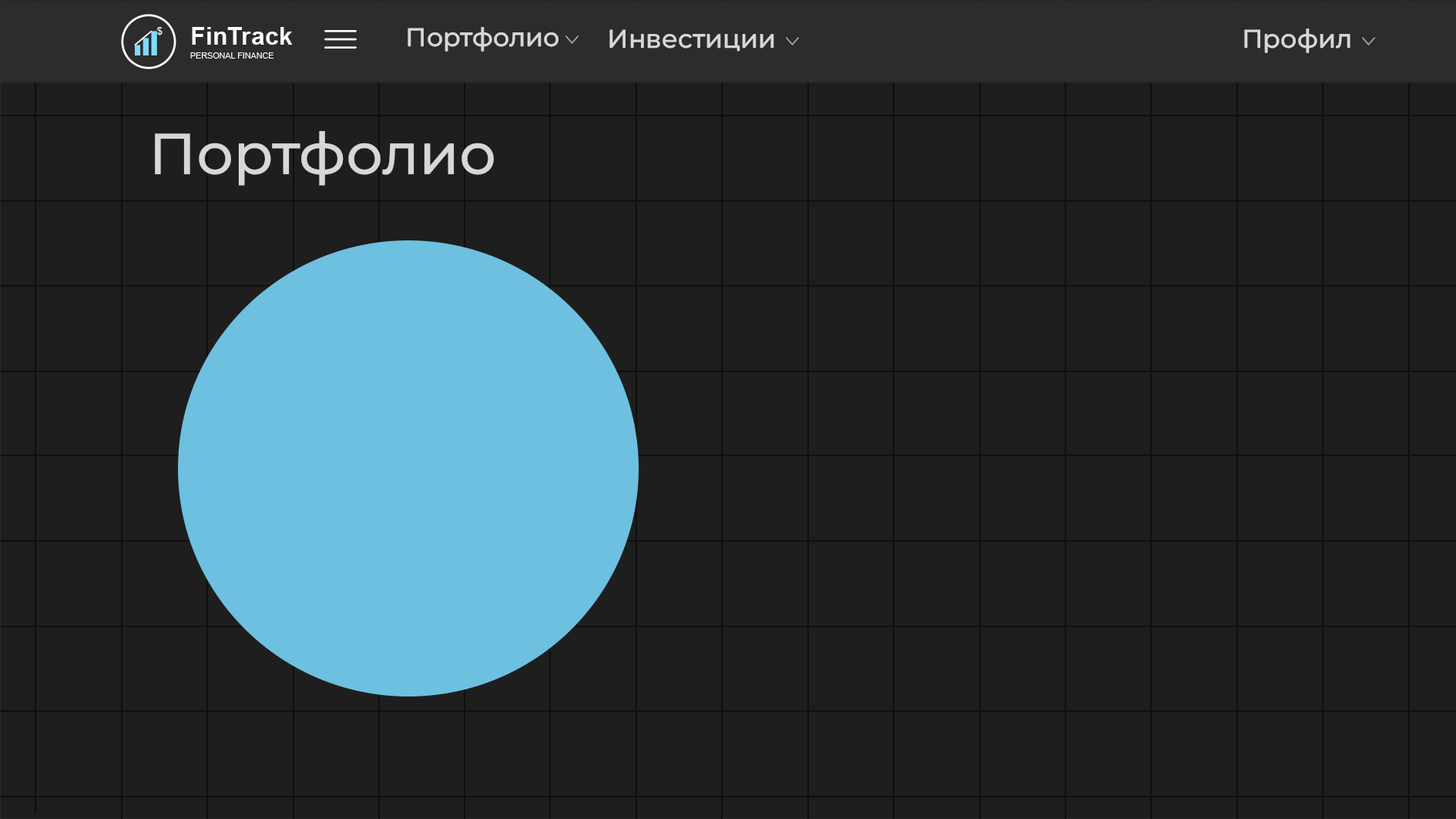
<style>
.page{position:relative;width:1456px;height:819px;background:#1e1e1e}
.page>*{position:absolute;margin:0}
.t1{font:25.7px "MontserratRoman-Medium";color:#d7d7d7}
.t2{font:57.8px "MontserratRoman-Medium";color:#d7d7d7}
</style>
<div class="page">
<p class="t1" style="left:408px;top:27px;width:151px;height:25px">Портфолио</p>
<p class="t1" style="left:609px;top:29px;width:165px;height:23px">Инвестиции</p>
<p class="t1" style="left:1244px;top:29px;width:107px;height:24px">Профил</p>
<p class="t2" style="left:155px;top:131px;width:339px;height:55px">Портфолио</p>
</div>
